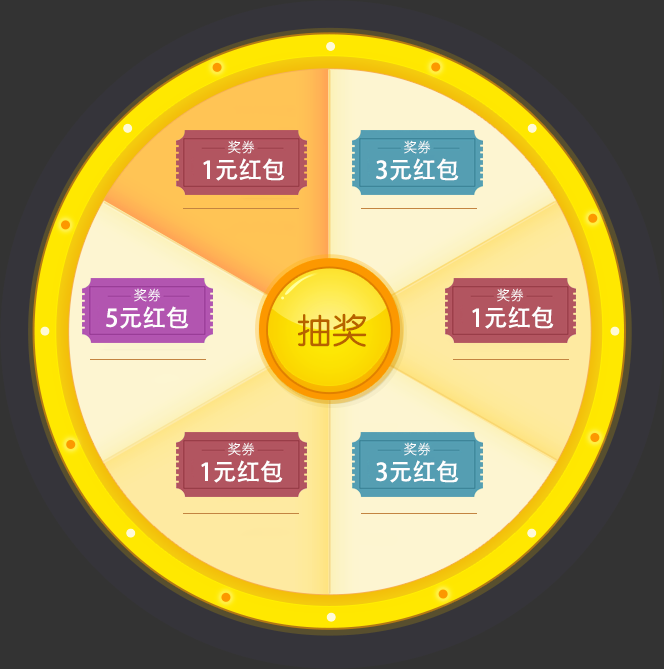
<style>
.page{position:relative;width:664px;height:669px;background:#333333}
.page>*{position:absolute;margin:0}
.t1{font:14px "MicrosoftJhengHeiUILight";color:#ffffff}
.t2{font:24px "AdobeHeitiStd-Regular";color:#ffffff}
.t3{font:24px "AdobeHeitiStd-Regular";color:#fffefe}
.t4{font:24px "AdobeHeitiStd-Regular";color:#fefefe}
</style>
<div class="page">
<p class="t1" style="left:228px;top:140px;width:27px;height:14px">奖券</p>
<p class="t1" style="left:404px;top:140px;width:27px;height:14px">奖券</p>
<p class="t2" style="left:203px;top:158px;width:82px;height:23px">1元红包</p>
<p class="t3" style="left:376px;top:158px;width:83px;height:23px">3元红包</p>
<p class="t1" style="left:134px;top:288px;width:27px;height:14px">奖券</p>
<p class="t1" style="left:497px;top:288px;width:27px;height:14px">奖券</p>
<p class="t4" style="left:106px;top:306px;width:83px;height:23px">5元红包</p>
<p class="t2" style="left:472px;top:306px;width:82px;height:23px">1元红包</p>
<p class="t1" style="left:228px;top:442px;width:27px;height:14px">奖券</p>
<p class="t1" style="left:404px;top:442px;width:27px;height:14px">奖券</p>
<p class="t2" style="left:201px;top:460px;width:82px;height:23px">1元红包</p>
<p class="t2" style="left:376px;top:460px;width:83px;height:23px">3元红包</p>
</div>
